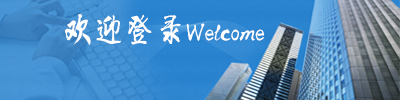
<style>
.page{position:relative;width:400px;height:100px}
.page>*{position:absolute;margin:0}
.t1{font:32.1px "LiXuKe";letter-spacing:-0.02em;color:#ffffff}
</style>
<div class="page">
<p class="t1" style="left:64px;top:14px;width:201px;height:32px">欢迎登录Welcome</p>
</div>
